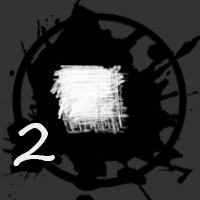
<style>
.page{position:relative;width:200px;height:200px;background:#333333}
.page>*{position:absolute;margin:0}
.t1{font:60px "SegoePrint";color:#efefef}
</style>
<div class="page">
<p class="t1" style="left:13px;top:123px;width:42px;height:43px">2</p>
</div>
